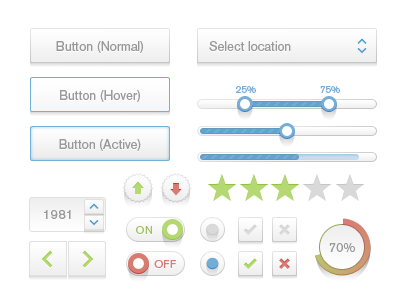
<style>
.page{position:relative;width:400px;height:300px;background:#ffffff}
.page>*{position:absolute;margin:0}
.t1{font:13px "AkzidenzGroteskBE-Regular";color:#999999}
.t2{font:10px "AkzidenzGroteskBE-Regular";color:#76abd7}
.t3{font:11px "AkzidenzGroteskBE-Regular";color:#9fbf63}
.t4{font:11px "AkzidenzGroteskBE-Regular";color:#d87c72}
</style>
<div class="page">
<p class="t1" style="left:56px;top:41px;width:87px;height:12px">Button (Normal)</p>
<p class="t1" style="left:209px;top:41px;width:82px;height:10px">Select location</p>
<p class="t2" style="left:236px;top:86px;width:20px;height:7px">25%</p>
<p class="t2" style="left:320px;top:86px;width:20px;height:7px">75%</p>
<p class="t1" style="left:60px;top:90px;width:80px;height:12px">Button (Hover)</p>
<p class="t1" style="left:59px;top:139px;width:82px;height:12px">Button (Active)</p>
<p class="t1" style="left:44px;top:210px;width:27px;height:9px">1981</p>
<p class="t3" style="left:136px;top:226px;width:16px;height:8px">ON</p>
<p class="t1" style="left:329px;top:243px;width:26px;height:10px">70%</p>
<p class="t4" style="left:154px;top:260px;width:22px;height:8px">OFF</p>
</div>
